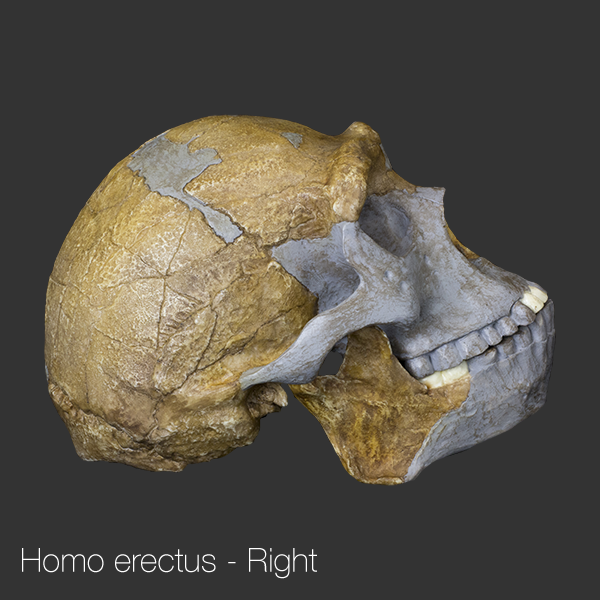
<style>
.page{position:relative;width:600px;height:600px;background:#333333}
.page>*{position:absolute;margin:0}
.t1{font:33.3px "HelveticaNeue-Thin";color:#ffffff}
</style>
<div class="page">
<p class="t1" style="left:22px;top:548px;width:295px;height:31px">Homo erectus - Right</p>
</div>
